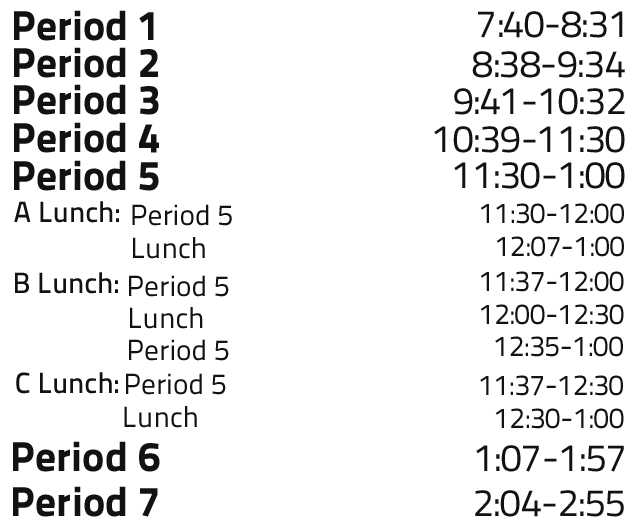
<style>
.page{position:relative;width:640px;height:530px;background:#ffffff}
.page>*{position:absolute;margin:0}
.t1{font:41.9px "TitilliumText25L-999wt";color:#121212}
.t2{font:38.4px "TitilliumText25L-400wt";color:#121212}
.t3{font:29.1px "TitilliumText25L-600wt";color:#121212}
.t4{font:29.1px "TitilliumText25L-400wt";color:#121212}
.t5{font:28.9px "TitilliumText25L-400wt";color:#121212}
</style>
<div class="page">
<p class="t1" style="left:14px;top:10px;width:140px;height:31px">Period 1</p>
<p class="t2" style="left:478px;top:11px;width:145px;height:27px">7:40-8:31</p>
<p class="t1" style="left:14px;top:47px;width:144px;height:31px">Period 2</p>
<p class="t2" style="left:472px;top:51px;width:153px;height:27px">8:38-9:34</p>
<p class="t1" style="left:14px;top:84px;width:145px;height:31px">Period 3</p>
<p class="t2" style="left:454px;top:88px;width:171px;height:27px">9:41-10:32</p>
<p class="t1" style="left:14px;top:122px;width:145px;height:31px">Period 4</p>
<p class="t2" style="left:434px;top:126px;width:191px;height:27px">10:39-11:30</p>
<p class="t1" style="left:14px;top:160px;width:145px;height:31px">Period 5</p>
<p class="t2" style="left:454px;top:162px;width:171px;height:27px">11:30-1:00</p>
<p class="t3" style="left:14px;top:201px;width:105px;height:22px">A Lunch:</p>
<p class="t4" style="left:132px;top:204px;width:100px;height:22px">Period 5</p>
<p class="t5" style="left:480px;top:203px;width:144px;height:21px">11:30-12:00</p>
<p class="t4" style="left:133px;top:237px;width:72px;height:22px">Lunch</p>
<p class="t5" style="left:496px;top:236px;width:128px;height:21px">12:07-1:00</p>
<p class="t3" style="left:15px;top:272px;width:103px;height:22px">B Lunch:</p>
<p class="t4" style="left:129px;top:275px;width:100px;height:22px">Period 5</p>
<p class="t5" style="left:480px;top:271px;width:144px;height:21px">11:37-12:00</p>
<p class="t5" style="left:480px;top:304px;width:144px;height:21px">12:00-12:30</p>
<p class="t4" style="left:130px;top:307px;width:73px;height:22px">Lunch</p>
<p class="t4" style="left:129px;top:339px;width:100px;height:22px">Period 5</p>
<p class="t5" style="left:495px;top:336px;width:128px;height:21px">12:35-1:00</p>
<p class="t3" style="left:16px;top:372px;width:102px;height:22px">C Lunch:</p>
<p class="t4" style="left:126px;top:373px;width:100px;height:22px">Period 5</p>
<p class="t5" style="left:480px;top:375px;width:143px;height:21px">11:37-12:30</p>
<p class="t4" style="left:124px;top:406px;width:73px;height:22px">Lunch</p>
<p class="t5" style="left:495px;top:408px;width:129px;height:21px">12:30-1:00</p>
<p class="t1" style="left:13px;top:441px;width:147px;height:31px">Period 6</p>
<p class="t2" style="left:476px;top:445px;width:148px;height:27px">1:07-1:57</p>
<p class="t1" style="left:13px;top:486px;width:145px;height:31px">Period 7</p>
<p class="t2" style="left:475px;top:490px;width:149px;height:27px">2:04-2:55</p>
</div>
